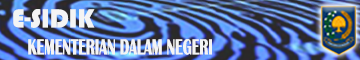
<style>
.page{position:relative;width:360px;height:60px}
.page>*{position:absolute;margin:0}
.t1{font:26.8px "Bauhaus93";color:#f4f4f4;scale:0.97 1}
.t2{font:22.6px "BritannicBold";color:#f4f4f4;scale:0.63 1}
</style>
<div class="page">
<p class="t1" style="left:13px;top:9px;width:82px;height:19px">E-SIDIK</p>
<p class="t2" style="left:28px;top:39px;width:184px;height:16px">KEMENTERIAN DALAM NEGERI</p>
</div>
